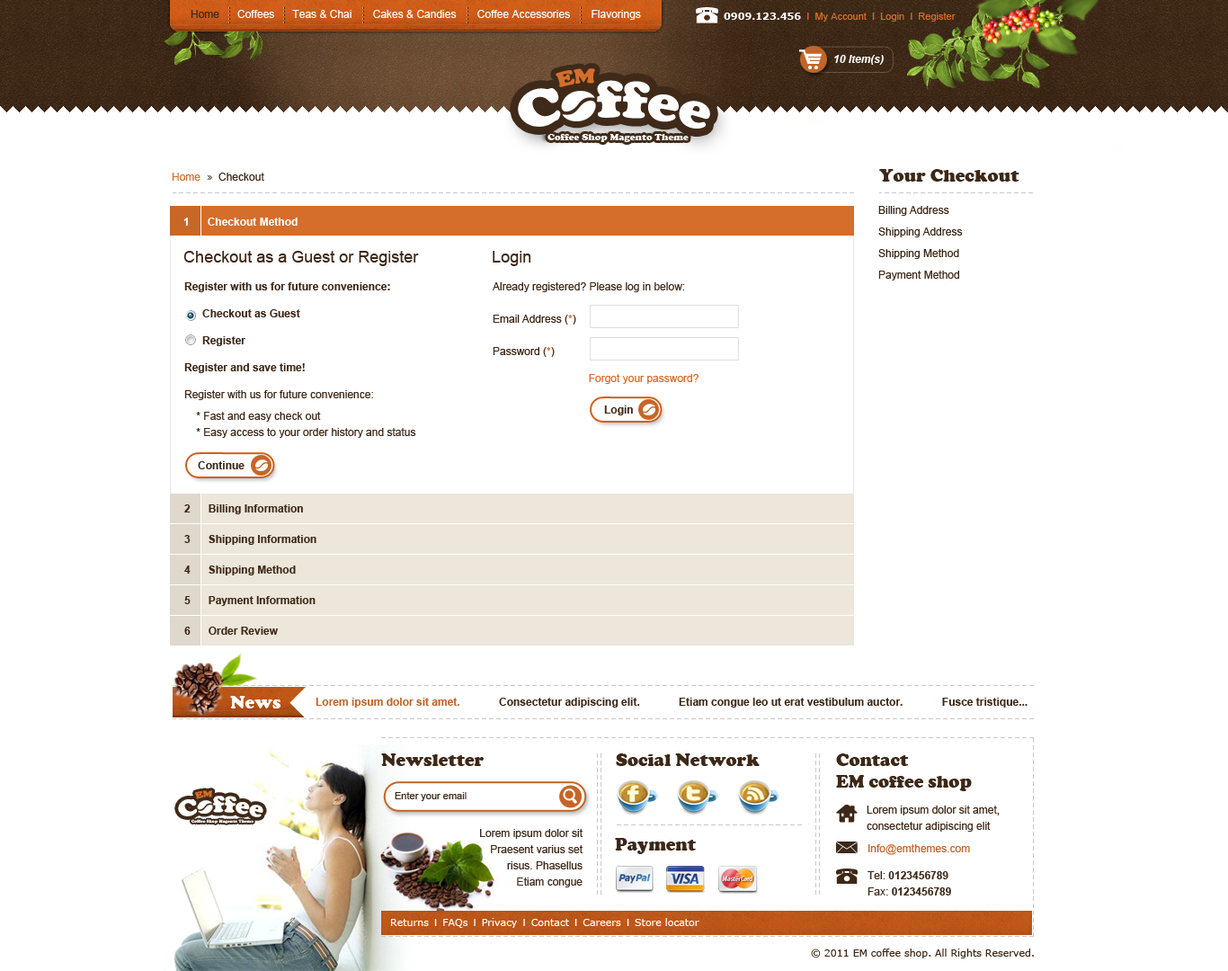
<style>
.page{position:relative;width:1228px;height:971px;background:#ffffff}
.page>*{position:absolute;margin:0}
.t1{font:10.8px "ArialMT";color:#fefefe}
.t2{font:10.8px "ArialMT";color:#3d2817}
.t3{font:9.9px "ArialMT";color:#d56d2b}
.t4{font:9.9px "Verdana-Bold";color:#ffffff}
.t5{font:10.8px "Arial-BoldItalicMT";color:#ffffff}
.t6{font:10.8px "ArialMT";color:#d56d2b}
.t7{font:18px "CooperBlack";color:#3d2817}
.t8{font:10.8px/21.6px "ArialMT";color:#3d2817}
.t9{font:10.8px "Arial-BoldMT";color:#ffffff}
.t10{font:16.2px "ArialMT";color:#3d2817}
.t11{font:10.8px/27px "Arial-BoldMT";color:#3d2817}
.t12{font:10.8px/16.2px "Arial-BoldMT";color:#3d2817}
.t13{font:10.8px/27px "ArialMT";color:#3d2817}
.t14{font:10.8px/16.2px "ArialMT";color:#3d2817}
.t15{font:10.8px/32.4px "ArialMT";color:#3d2817}
.t16{font:10.8px/32.4px "ArialMT";color:#d56d2b}
.t17{font:10.8px/27px "ArialMT";color:#d56d2b}
.t18{font:10.8px "Arial-BoldMT";color:#3d2817}
.t19{font:10.8px/30.6px "Arial-BoldMT";color:#3d2817}
.t20{font:18px "CooperBlack";color:#ffffff}
.t21{font:10.8px "Arial-BoldMT";color:#c26529}
.t22{font:18px/21.6px "CooperBlack";color:#3d2817}
.t23{font:9.9px "ArialMT";color:#3d2817}
.t24{font:10.8px/27px "ArialMT";color:#c26529}
.t25{font:9.9px "Verdana";color:#ffffff}
.t26{font:9.9px "ArialMT";color:#ffffff}
.t27{font:9.9px "Verdana";color:#3d2817}
</style>
<div class="page">
<p class="t1" style="left:191px;top:10px;width:450px;height:10px"><span class="t2">Home</span>      Coffees      Teas &amp; Chai       Cakes &amp; Candies       Coffee Accessories       Flavorings</p>
<p class="t3" style="left:724px;top:13px;width:232px;height:9px"><span class="t4">0909.123.456</span>  I  My Account  I  Login  I  Register</p>
<p class="t5" style="left:834px;top:55px;width:50px;height:10px">10 Item(s)</p>
<p class="t2" style="left:172px;top:173px;width:92px;height:8px"><span class="t6">Home</span>      Checkout</p>
<p class="t7" style="left:879px;top:169px;width:141px;height:13px">Your Checkout</p>
<p class="t8" style="left:878px;top:206px;width:85px;height:75px">Billing Address<br>Shipping Address<br>Shipping Method<br>Payment Method</p>
<p class="t9" style="left:183px;top:218px;width:115px;height:8px">1      Checkout Method</p>
<p class="t10" style="left:183px;top:251px;width:236px;height:15px">Checkout as a Guest or Register</p>
<p class="t10" style="left:493px;top:251px;width:38px;height:15px">Login</p>
<p class="t11" style="left:184px;top:282px;width:232px;height:156px"><span class="t12">Register with us for future convenience:<br>      </span>Checkout as Guest<br>      Register<br>Register and save time!<br><span class="t13">Register with us for future convenience:<br></span><span class="t8">    * Fast and easy check out<br></span><span class="t14">    * Easy access to your order history and status</span></p>
<p class="t14" style="left:493px;top:282px;width:206px;height:102px">Already registered? Please log in below:<br><span class="t15">Email Address (</span><span class="t16">*</span><span class="t15">)<br>Password (</span><span class="t16">*</span><span class="t15">)<br>                                </span><span class="t17">Forgot your password?</span></p>
<p class="t18" style="left:604px;top:405px;width:29px;height:10px">Login</p>
<p class="t18" style="left:198px;top:461px;width:47px;height:8px">Continue</p>
<p class="t19" style="left:184px;top:504px;width:132px;height:131px">2      Billing Information<br>3      Shipping Information<br>4      Shipping Method<br>5      Payment Information<br>6      Order Review</p>
<p class="t20" style="left:230px;top:696px;width:51px;height:12px">News</p>
<p class="t18" style="left:316px;top:698px;width:712px;height:10px"><span class="t21">Lorem ipsum dolor sit amet.</span>             Consectetur adipiscing elit.             Etiam congue leo ut erat vestibulum auctor.             Fusce tristique...</p>
<p class="t7" style="left:381px;top:753px;width:103px;height:13px">Newsletter</p>
<p class="t7" style="left:616px;top:753px;width:144px;height:13px">Social Network</p>
<p class="t22" style="left:836px;top:753px;width:136px;height:38px">Contact<br>EM coffee shop</p>
<p class="t23" style="left:395px;top:792px;width:72px;height:9px">Enter your email</p>
<p class="t14" style="left:867px;top:806px;width:133px;height:26px">Lorem ipsum dolor sit amet, <br>consectetur adipiscing elit</p>
<p class="t14" style="left:480px;top:829px;width:103px;height:58px;text-align:right">Lorem ipsum dolor sit<br>Praesent varius set<br>risus. Phasellus<br>Etiam congue</p>
<p class="t7" style="left:615px;top:838px;width:81px;height:16px">Payment</p>
<p class="t24" style="left:868px;top:844px;width:102px;height:51px">Info@emthemes.com<br><span class="t13">Tel: </span><span class="t11">0123456789<br></span><span class="t14">Fax: </span><span class="t12">0123456789</span></p>
<p class="t25" style="left:391px;top:918px;width:308px;height:10px">Returns<span class="t26">  I  </span>FAQs<span class="t26">  I  </span>Privacy<span class="t26">  I  </span>Contact<span class="t26">  I  </span>Careers<span class="t26">  I  </span>Store locator</p>
<p class="t27" style="left:811px;top:948px;width:223px;height:10px">© 2011 EM coffee shop. All Rights Reserved.</p>
</div>
